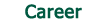
<style>
.page{position:relative;width:107px;height:25px;background:#ffffff}
.page>*{position:absolute;margin:0}
.t1{font:18px "Tahoma";letter-spacing:0.02em;color:#005941;font-weight:bold}
</style>
<div class="page">
<p class="t1" style="left:25px;top:4px;width:57px;height:15px">Career</p>
</div>
